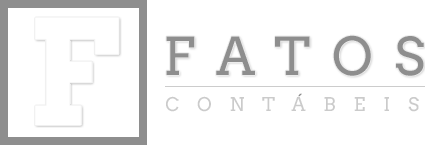
<style>
.page{position:relative;width:425px;height:145px;background:#ffffff}
.page>*{position:absolute;margin:0}
.t1{font:52.1px "Arvo";letter-spacing:0.455em;color:#8e8e8e}
.t2{font:18.7px "Arvo";letter-spacing:0.95em;color:#cbcbcb}
.t3{font:18.5px "Arvo";letter-spacing:-0.08em;color:#8e8e8e}
</style>
<div class="page">
<p class="t1" style="left:166px;top:35px;width:258px;height:41px">FATOS</p>
<p class="t2" style="left:166px;top:96px;width:253px;height:16px">CONTABEIS</p>
<p class="t3" style="left:298px;top:93px;width:4px;height:4px">´</p>
</div>
